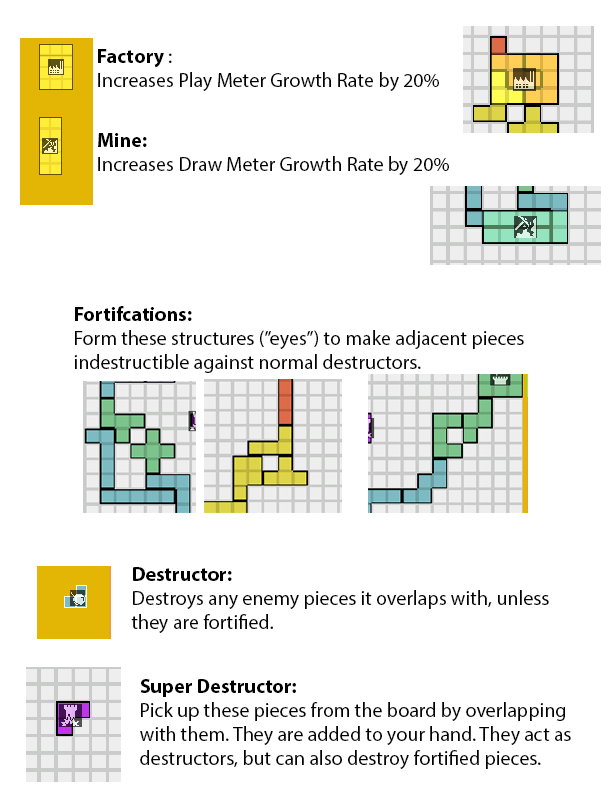
<style>
.page{position:relative;width:612px;height:792px;background:#ffffff}
.page>*{position:absolute;margin:0}
.t1{font:20px "MyriadPro-Regular";color:#000000}
.t2{font:20px "MyriadPro-Bold";color:#000000}
</style>
<div class="page">
<p class="t1" style="left:98px;top:49px;width:341px;height:42px"><span class="t2">Factory </span>:<br>Increases Play Meter Growth Rate by 20%</p>
<p class="t1" style="left:98px;top:133px;width:351px;height:42px"><span class="t2">Mine:<br></span>Increases Draw Meter Growth Rate by 20%</p>
<p class="t1" style="left:74px;top:306px;width:450px;height:67px"><span class="t2">Fortifcations: <br></span>Form these structures (”eyes”) to make adjacent pieces indestructible against normal destructors.</p>
<p class="t1" style="left:131px;top:567px;width:418px;height:66px"><span class="t2">Destructor: <br></span>Destroys any enemy pieces it overlaps with, unless they are fortified.</p>
<p class="t1" style="left:140px;top:679px;width:431px;height:90px"><span class="t2">Super Destructor: <br></span>Pick up these pieces from the board by overlapping with them. They are added to your hand. They act as destructors, but can also destroy fortified pieces.</p>
</div>
